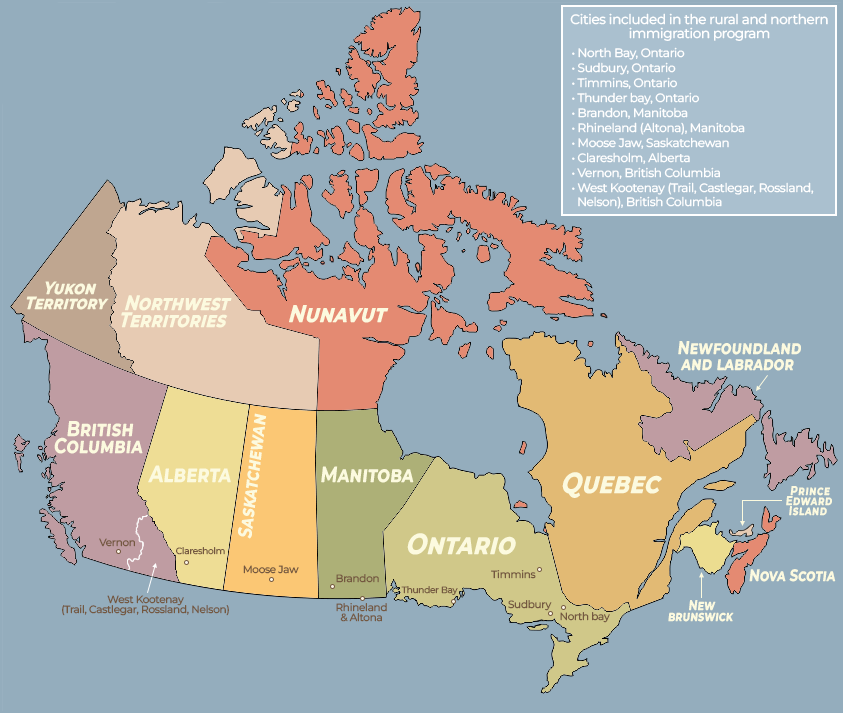
<style>
.page{position:relative;width:843px;height:713px;background:#94adbd}
.page>*{position:absolute;margin:0}
.t1{font:13.5px/13.5px "MontserratRoman_422.000wght";letter-spacing:-0.025em;color:#ffffff}
.t2{font:12px "MontserratRoman_422.000wght";letter-spacing:-0.025em;color:#ffffff}
.t3{font:12px/13.5px "MontserratRoman_422.000wght";letter-spacing:-0.025em;color:#ffffff}
.t4{font:12px/12px "MontserratRoman_422.000wght";letter-spacing:-0.025em;color:#ffffff}
.t5{font:18.1px/14.9px "MontserratRoman_711.000wght";letter-spacing:0.02em;color:#fcfadf;font-variant:small-caps;scale:0.83 1}
.t6{font:21.3px/16.9px "MontserratRoman_711.000wght";letter-spacing:0.02em;color:#fcfadf;font-variant:small-caps;scale:0.79 1}
.t7{font:24.9px "MontserratRoman_711.000wght";letter-spacing:0.02em;color:#fcfadf;font-variant:small-caps;scale:0.81 1}
.t8{font:18.5px/16px "MontserratRoman_678.000wght";letter-spacing:0.02em;color:#fcfadf;font-variant:small-caps;scale:0.78 1}
.t9{font:19.4px "MontserratRoman_678.000wght";letter-spacing:0.02em;color:#fcfadf;font-variant:small-caps;scale:0.8 1}
.t10{font:21.2px/16.4px "MontserratRoman_678.000wght";letter-spacing:0.02em;color:#fcfadf;font-variant:small-caps;scale:0.8 1}
.t11{font:23.2px "MontserratRoman_678.000wght";letter-spacing:0.02em;color:#fcfadf;font-variant:small-caps;scale:0.8 1}
.t12{font:21.9px "MontserratRoman_678.000wght";letter-spacing:0.02em;color:#fcfadf;font-variant:small-caps;scale:0.8 1}
.t13{font:29.8px "MontserratRoman_711.000wght";letter-spacing:0.02em;color:#fcfadf;font-variant:small-caps;scale:0.81 1}
.t14{font:12.7px/10px "MontserratRoman_678.000wght";letter-spacing:0.08em;color:#fcfadf;font-variant:small-caps;scale:0.78 1}
.t15{font:10.4px "MontserratRoman_422.000wght";letter-spacing:-0.025em;color:#745840}
.t16{font:9px "MontserratRoman_422.000wght";letter-spacing:-0.025em;color:#745840}
.t17{font:16.5px "MontserratRoman_678.000wght";letter-spacing:0.02em;color:#fcfadf;font-variant:small-caps;scale:0.78 1}
.t18{font:10.5px/10px "MontserratRoman_422.000wght";letter-spacing:-0.025em;color:#745840}
.t19{font:10.4px/10px "MontserratRoman_422.000wght";letter-spacing:-0.025em;color:#745840}
.t20{font:13.9px/11px "MontserratRoman_678.000wght";letter-spacing:0.02em;color:#fcfadf;font-variant:small-caps;scale:0.78 1}
</style>
<div class="page">
<p class="t1" style="left:570px;top:13px;width:258px;height:28px;text-align:center">Cities included in the rural and northern <br>immigration program</p>
<p class="t2" style="left:572px;top:47px;width:113px;height:13px">• North Bay, Ontario</p>
<p class="t2" style="left:572px;top:62px;width:104px;height:13px">• Sudbury, Ontario</p>
<p class="t2" style="left:572px;top:77px;width:105px;height:12px">• Timmins, Ontario</p>
<p class="t2" style="left:572px;top:92px;width:127px;height:13px">• Thunder bay, Ontario</p>
<p class="t2" style="left:572px;top:107px;width:116px;height:12px">• Brandon, Manitoba</p>
<p class="t2" style="left:572px;top:122px;width:173px;height:13px">• Rhineland (Altona), Manitoba</p>
<p class="t2" style="left:572px;top:137px;width:157px;height:12px">• Moose Jaw, Saskatchewan</p>
<p class="t2" style="left:572px;top:152px;width:118px;height:12px">• Claresholm, Alberta</p>
<p class="t2" style="left:572px;top:167px;width:148px;height:12px">• Vernon, British Columbia</p>
<p class="t3" style="left:572px;top:182px;width:242px;height:27px"><span class="t4">• </span>West Kootenay (Trail, Castlegar, Rossland, <br>  Nelson), British Columbia</p>
<p class="t5" style="left:26px;top:281px;width:83px;height:29px;text-align:center">Yukon<br>Territory</p>
<p class="t6" style="left:121px;top:295px;width:111px;height:33px;text-align:center">Northwest<br>Territories</p>
<p class="t7" style="left:289px;top:305px;width:100px;height:18px">Nunavut</p>
<p class="t8" style="left:678px;top:341px;width:123px;height:30px;text-align:center">Newfoundland<br>and labrador</p>
<p class="t9" style="left:238px;top:413px;width:29px;height:126px;rotate:-83deg">Saskatchewan</p>
<p class="t10" style="left:54px;top:421px;width:89px;height:33px;text-align:center">British<br>Columbia</p>
<p class="t11" style="left:148px;top:465px;width:83px;height:18px">Alberta</p>
<p class="t12" style="left:321px;top:466px;width:93px;height:17px">Manitoba</p>
<p class="t13" style="left:562px;top:472px;width:100px;height:26px">Quebec</p>
<p class="t14" style="left:786px;top:486px;width:46px;height:30px;text-align:center">Prince<br>Edward<br>Island</p>
<p class="t13" style="left:407px;top:533px;width:109px;height:22px">Ontario</p>
<p class="t15" style="left:99px;top:538px;width:36px;height:9px">Vernon</p>
<p class="t16" style="left:176px;top:547px;width:49px;height:8px">Claresholm</p>
<p class="t15" style="left:243px;top:565px;width:56px;height:9px">Moose Jaw</p>
<p class="t17" style="left:749px;top:569px;width:87px;height:13px">Nova Scotia</p>
<p class="t15" style="left:336px;top:574px;width:43px;height:9px">Brandon</p>
<p class="t15" style="left:491px;top:570px;width:45px;height:9px">Timmins</p>
<p class="t16" style="left:401px;top:586px;width:57px;height:9px">Thunder Bay</p>
<p class="t18" style="left:62px;top:595px;width:167px;height:21px;text-align:center">West Kootenay<br>(Trail, Castlegar, Rossland, Nelson)</p>
<p class="t19" style="left:336px;top:603px;width:51px;height:19px;text-align:center">Rhineland<br>&amp; Altona</p>
<p class="t15" style="left:508px;top:600px;width:44px;height:11px">Sudbury</p>
<p class="t20" style="left:668px;top:600px;width:66px;height:22px;text-align:center">New<br>brunswick</p>
<p class="t15" style="left:560px;top:612px;width:50px;height:11px">North bay</p>
</div>
